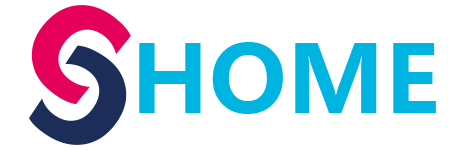
<style>
.page{position:relative;width:454px;height:150px;background:#ffffff}
.page>*{position:absolute;margin:0}
.t1{font:172.1px "MicrosoftYaHei-Bold";color:#e50059}
.t2{font:171.6px "MicrosoftYaHei-Bold";color:#1b2d58}
.t3{font:93.4px "MicrosoftYaHei-Bold";color:#00b4e2}
</style>
<div class="page">
<p class="t1" style="left:31px;top:5px;width:100px;height:100px;rotate:39deg">c</p>
<p class="t2" style="left:29px;top:45px;width:98px;height:100px;rotate:-146deg">c</p>
<p class="t3" style="left:139px;top:42px;width:297px;height:72px">HOME</p>
</div>
